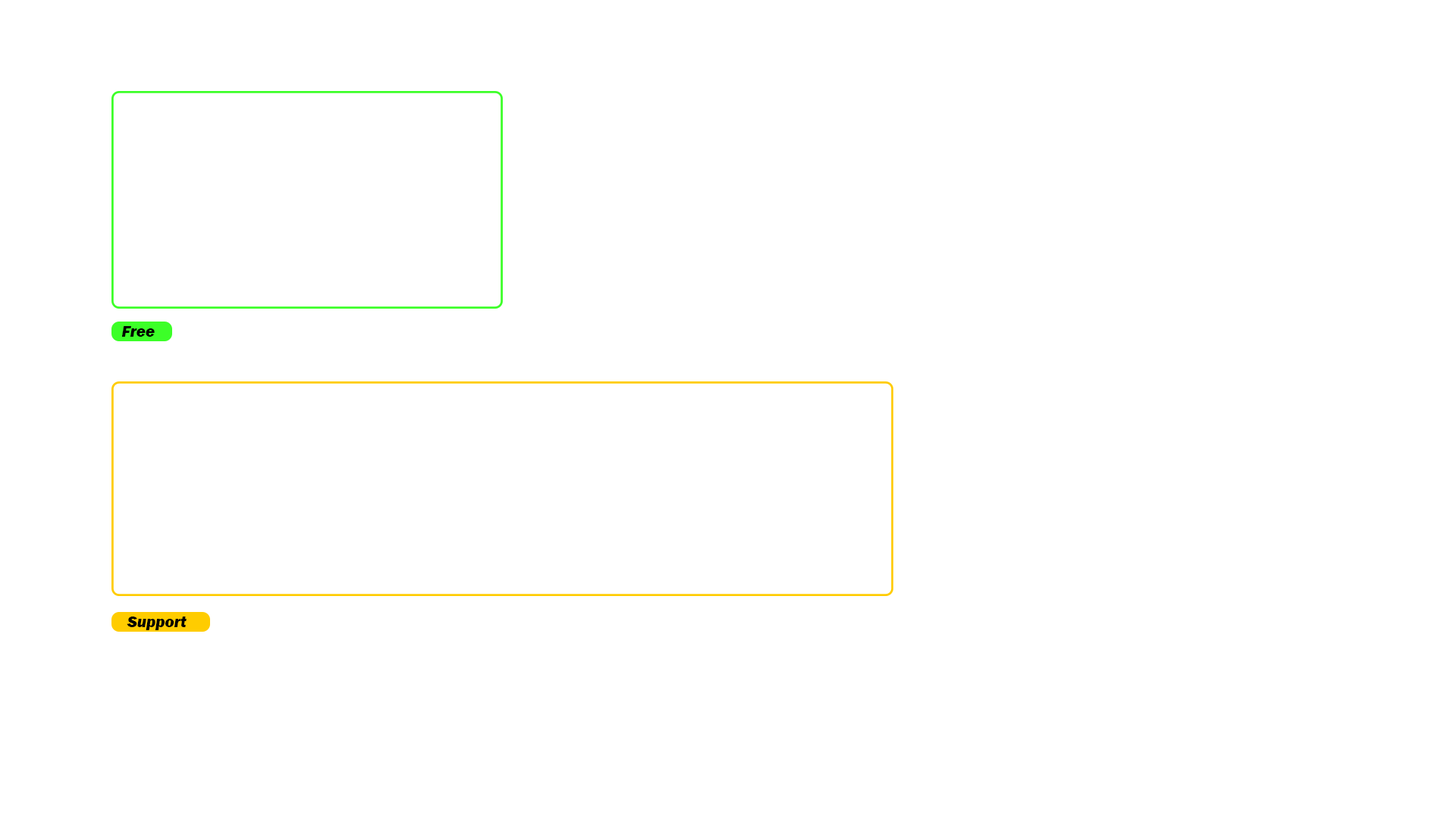
<style>
.page{position:relative;width:1456px;height:819px;background:#ffffff}
.page>*{position:absolute;margin:0}
.t1{font:15.9px "FranklinGothic-HeavyItalic";color:#000000}
</style>
<div class="page">
<p class="t1" style="left:121px;top:326px;width:34px;height:11px">Free</p>
<p class="t1" style="left:127px;top:617px;width:60px;height:13px">Support</p>
</div>
